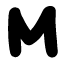
<style>
.page{position:relative;width:64px;height:64px;background:#ffffff}
.page>*{position:absolute;margin:0}
.t1{font:117px "godoMaum";letter-spacing:-0.04em;color:#000000;font-weight:bold}
</style>
<div class="page">
<p class="t1" style="left:8px;top:6px;width:50px;height:52px">M</p>
</div>
